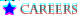
<style>
.page{position:relative;width:80px;height:15px;background:#ffffff}
.page>*{position:absolute;margin:0}
.t1{font:12px "CharlemagneStd-Bold"}
</style>
<div class="page">
<p class="t1" style="left:20px;top:2px;width:58px;height:11px">Careers</p>
</div>
